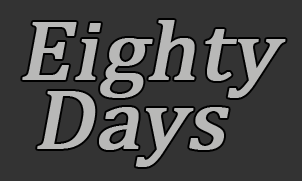
<style>
.page{position:relative;width:302px;height:181px;background:#333333}
.page>*{position:absolute;margin:0}
.t1{font:85.2px "CambriaMath";color:#b8b8b7;font-weight:bold;font-style:italic;scale:1.05 1}
</style>
<div class="page">
<p class="t1" style="left:22px;top:20px;width:264px;height:78px">Eighty</p>
<p class="t1" style="left:37px;top:91px;width:192px;height:76px">Days</p>
</div>
